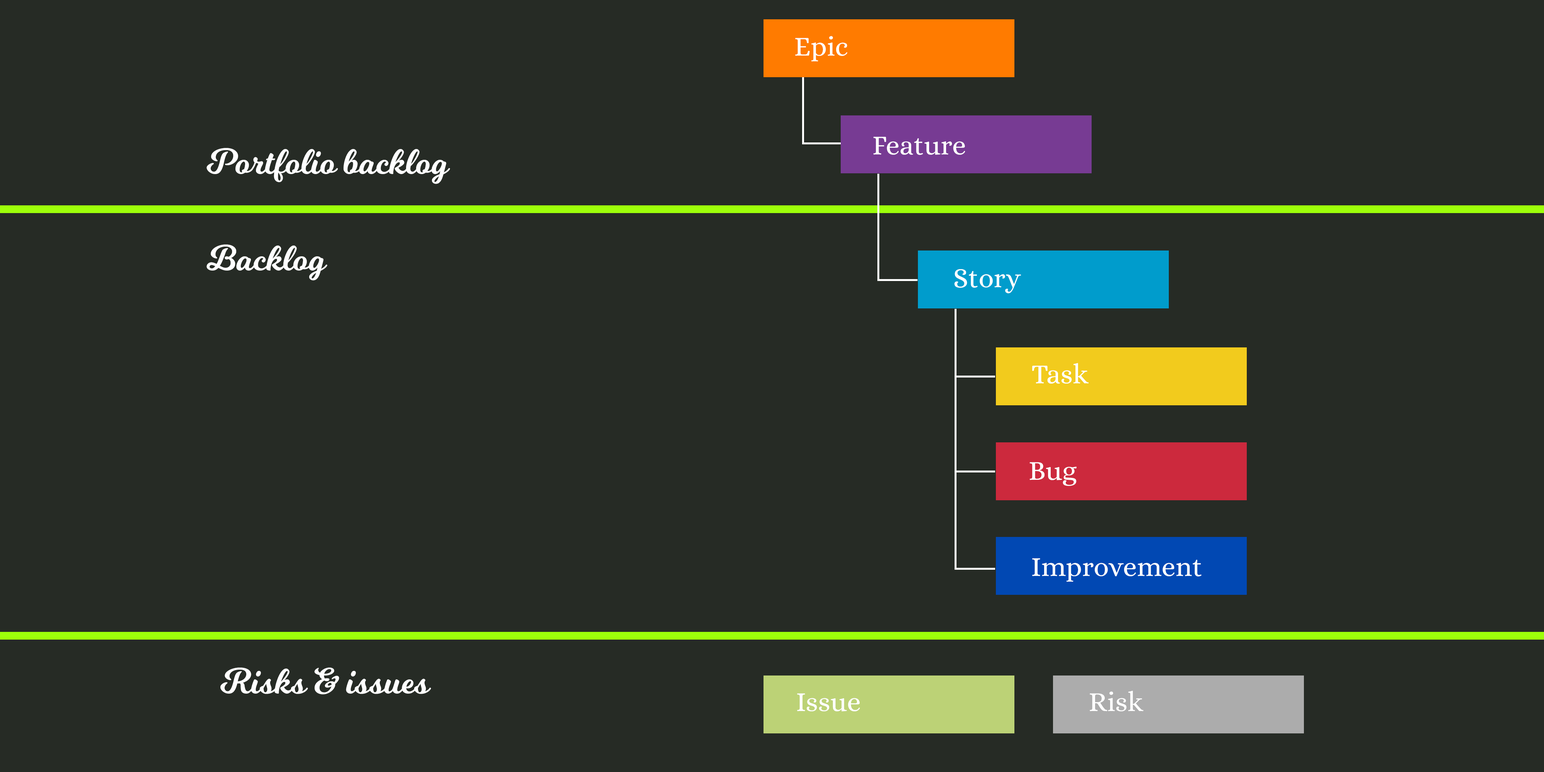
<style>
.page{position:relative;width:1544px;height:772px;background:#262b25}
.page>*{position:absolute;margin:0}
.t1{font:27.8px "Alice-Regular";color:#ffffff}
.t2{font:35.5px "Milkshake";color:#ffffff}
</style>
<div class="page">
<p class="t1" style="left:795px;top:36px;width:53px;height:25px">Epic</p>
<p class="t1" style="left:873px;top:137px;width:92px;height:18px">Feature</p>
<p class="t2" style="left:207px;top:148px;width:243px;height:36px">Portfolio backlog</p>
<p class="t2" style="left:207px;top:244px;width:120px;height:37px">Backlog</p>
<p class="t1" style="left:954px;top:269px;width:67px;height:24px">Story</p>
<p class="t1" style="left:1032px;top:363px;width:57px;height:21px">Task</p>
<p class="t1" style="left:1030px;top:462px;width:47px;height:24px">Bug</p>
<p class="t1" style="left:1032px;top:558px;width:170px;height:24px">Improvement</p>
<p class="t2" style="left:220px;top:668px;width:211px;height:27px">Risks &amp; issues</p>
<p class="t1" style="left:797px;top:693px;width:63px;height:19px">Issue</p>
<p class="t1" style="left:1090px;top:691px;width:54px;height:21px">Risk</p>
</div>
